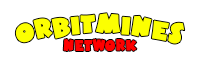
<style>
.page{position:relative;width:200px;height:75px;background:#ffffff}
.page>*{position:absolute;margin:0}
.t1{font:25px "HotMustardBTN";color:#fcff01}
.t2{font:15px "HotMustardBTN";color:#ff0000}
</style>
<div class="page">
<p class="t1" style="left:15px;top:13px;width:170px;height:31px">OrbitMines</p>
<p class="t2" style="left:63px;top:39px;width:74px;height:12px">Network</p>
</div>
